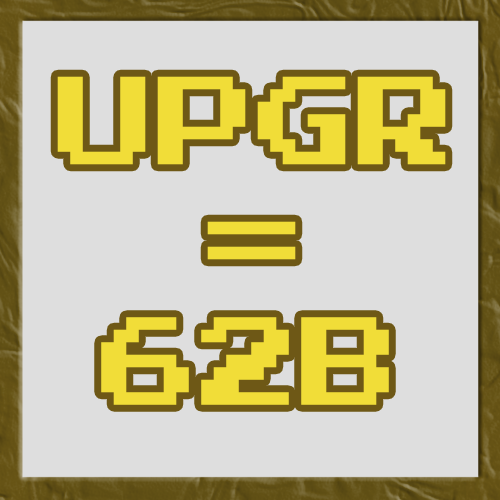
<style>
.page{position:relative;width:500px;height:500px;background:#dedede}
.page>*{position:absolute;margin:0}
.t1{font:100px "PressStart2P-Regular";color:#f1dd38}
</style>
<div class="page">
<p class="t1" style="left:57px;top:76px;width:389px;height:184px;text-align:center">UPGR      =</p>
<p class="t1" style="left:101px;top:317px;width:288px;height:88px">62B</p>
</div>
